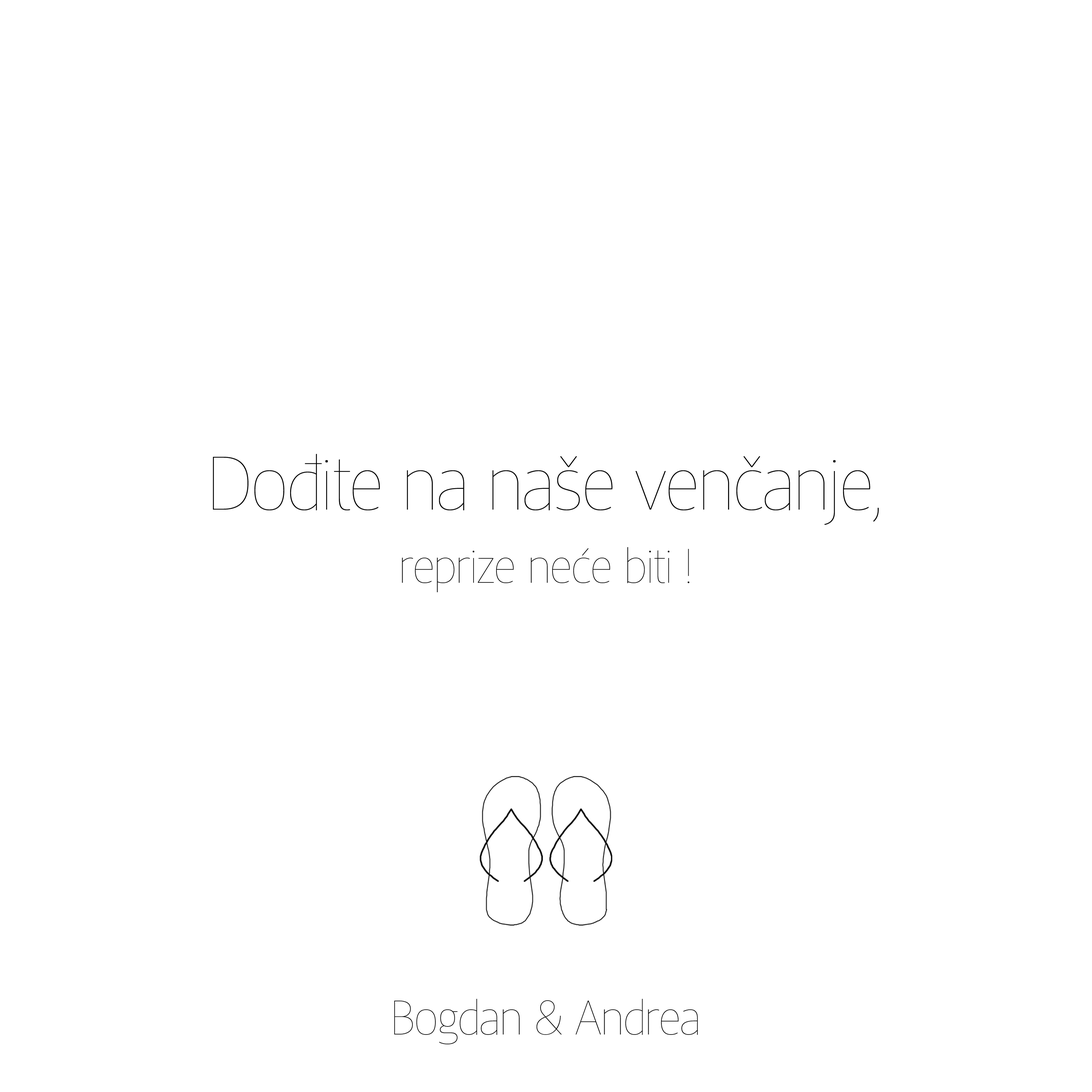
<style>
.page{position:relative;width:1092px;height:1092px;background:#ffffff}
.page>*{position:absolute;margin:0}
.t1{font:73.1px/73.1px "AdamantSansBG";color:#000000}
.t2{font:47px/73.1px "AdamantSansBG";color:#000000}
.t3{font:47px "AdamantSansBG";color:#000000}
</style>
<div class="page">
<p class="t1" style="left:213px;top:454px;width:666px;height:138px;text-align:center">Dođite na naše venčanje,<br><span class="t2">reprize neće biti !</span></p>
<p class="t3" style="left:394px;top:999px;width:304px;height:45px">Bogdan &amp; Andrea</p>
</div>
